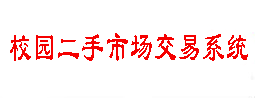
<style>
.page{position:relative;width:255px;height:98px;background:#ffffff}
.page>*{position:absolute;margin:0}
.t1{font:42.5px "LiSu";letter-spacing:0.05em;color:#f50000;scale:0.54 1}
</style>
<div class="page">
<p class="t1" style="left:10px;top:33px;width:238px;height:28px">校园二手市场交易系统</p>
</div>
